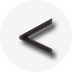
<style>
.page{position:relative;width:72px;height:72px;background:#f5f5f5}
.page>*{position:absolute;margin:0}
.t1{font:72px "MicrosoftYaHei";color:#343030}
</style>
<div class="page">
<p class="t1" style="left:19px;top:18px;width:34px;height:37px">&lt;</p>
</div>
